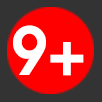
<style>
.page{position:relative;width:102px;height:102px;background:#333333}
.page>*{position:absolute;margin:0}
.t1{font:65.5px "AvantGarde-Demi";color:#ffffff}
</style>
<div class="page">
<p class="t1" style="left:13px;top:25px;width:71px;height:51px">9+</p>
</div>
